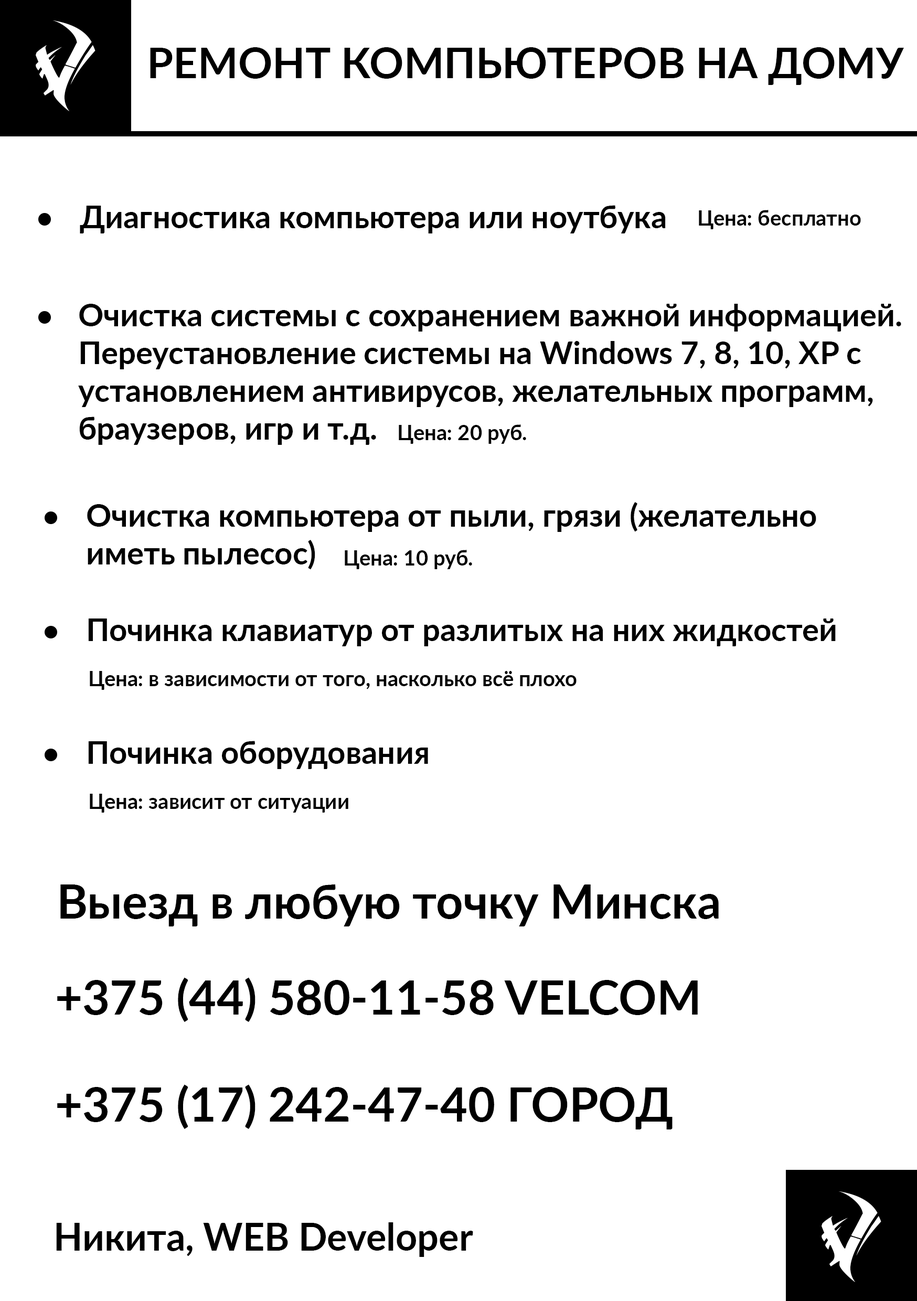
<style>
.page{position:relative;width:917px;height:1301px;background:#ffffff}
.page>*{position:absolute;margin:0}
.t1{font:78.7px "RaseOneOriginal";color:#ffffff}
.t2{font:42.5px "Lato-Bold";color:#000000;text-transform:uppercase}
.t3{font:31.5px "Lato-Bold";color:#000000}
.t4{font:21px "Lato-Bold";color:#000000}
.t5{font:47.2px "Lato-Bold";color:#000000}
.t6{font:37.8px "Lato-Bold";color:#000000}
</style>
<div class="page">
<p class="t1" style="left:36px;top:20px;width:59px;height:91px">V</p>
<p class="t2" style="left:150px;top:47px;width:754px;height:38px">Ремонт компьютеров на дому</p>
<p class="t3" style="left:80px;top:205px;width:586px;height:28px">Диагностика компьютера или ноутбука</p>
<p class="t4" style="left:699px;top:210px;width:162px;height:19px">Цена: бесплатно</p>
<p class="t3" style="left:78px;top:304px;width:823px;height:141px">Очистка системы с сохранением важной информацией. <br>Переустановление системы на Windows 7, 8, 10, XP с <br>установлением антивирусов, желательных программ, <br>браузеров, игр и т.д.</p>
<p class="t4" style="left:399px;top:424px;width:127px;height:20px">Цена: 20 руб.</p>
<p class="t3" style="left:87px;top:502px;width:729px;height:68px">Очистка компьютера от пыли, грязи (желательно <br>иметь пылесос)</p>
<p class="t4" style="left:345px;top:550px;width:127px;height:19px">Цена: 10 руб.</p>
<p class="t3" style="left:88px;top:618px;width:747px;height:28px">Починка клавиатур от разлитых на них жидкостей</p>
<p class="t4" style="left:90px;top:671px;width:486px;height:19px">Цена: в зависимости от того, насколько всё плохо</p>
<p class="t3" style="left:88px;top:741px;width:340px;height:28px">Починка оборудования</p>
<p class="t4" style="left:90px;top:794px;width:258px;height:18px">Цена: зависит от ситуации</p>
<p class="t5" style="left:60px;top:884px;width:659px;height:42px">Выезд в любую точку Минска</p>
<p class="t5" style="left:57px;top:977px;width:641px;height:45px">+375 (44) 580-11-58 VELCOM</p>
<p class="t5" style="left:57px;top:1084px;width:615px;height:45px">+375 (17) 242-47-40 ГОРОД</p>
<p class="t1" style="left:821px;top:1191px;width:60px;height:91px">V</p>
<p class="t6" style="left:56px;top:1222px;width:417px;height:35px">Никита, WEB Developer</p>
</div>
